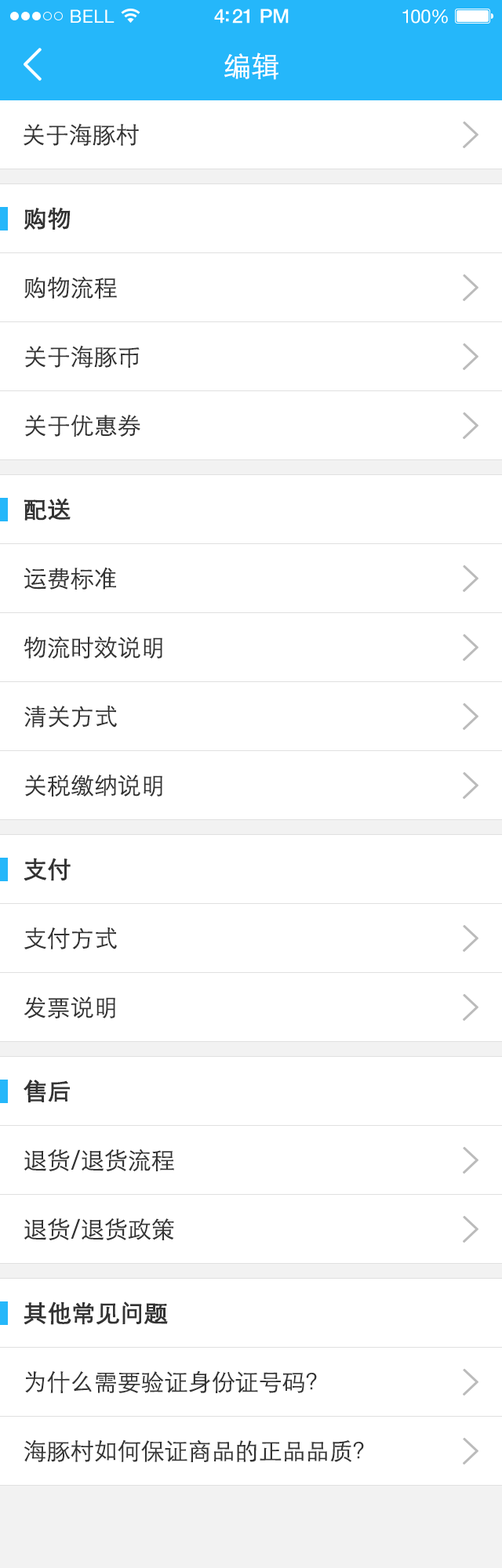
<style>
.page{position:relative;width:502px;height:1568px;background:#ffffff}
.page>*{position:absolute;margin:0}
.t1{font:28.2px "STXihei";color:#ffffff}
.t2{font:23.5px "STXihei";color:#333333}
.t3{font:23.5px "STXihei";color:#333333;font-weight:bold}
</style>
<div class="page">
<p class="t1" style="left:224px;top:53px;width:54px;height:27px">编辑</p>
<p class="t2" style="left:24px;top:123px;width:115px;height:23px">关于海豚村</p>
<p class="t3" style="left:24px;top:207px;width:47px;height:23px">购物</p>
<p class="t2" style="left:24px;top:276px;width:93px;height:23px">购物流程</p>
<p class="t2" style="left:25px;top:345px;width:115px;height:23px">关于海豚币</p>
<p class="t2" style="left:25px;top:414px;width:115px;height:23px">关于优惠券</p>
<p class="t3" style="left:24px;top:498px;width:47px;height:23px">配送</p>
<p class="t2" style="left:24px;top:567px;width:92px;height:23px">运费标准</p>
<p class="t2" style="left:24px;top:636px;width:138px;height:23px">物流时效说明</p>
<p class="t2" style="left:24px;top:705px;width:93px;height:23px">清关方式</p>
<p class="t2" style="left:25px;top:775px;width:137px;height:22px">关税缴纳说明</p>
<p class="t3" style="left:24px;top:858px;width:47px;height:23px">支付</p>
<p class="t2" style="left:24px;top:927px;width:93px;height:22px">支付方式</p>
<p class="t2" style="left:24px;top:996px;width:91px;height:22px">发票说明</p>
<p class="t3" style="left:24px;top:1080px;width:46px;height:23px">售后</p>
<p class="t2" style="left:24px;top:1149px;width:150px;height:22px">退货/退货流程</p>
<p class="t2" style="left:24px;top:1218px;width:150px;height:22px">退货/退货政策</p>
<p class="t3" style="left:24px;top:1301px;width:144px;height:24px">其他常见问题</p>
<p class="t2" style="left:25px;top:1370px;width:292px;height:23px">为什么需要验证身份证号码？</p>
<p class="t2" style="left:24px;top:1439px;width:340px;height:23px">海豚村如何保证商品的正品品质？</p>
</div>
